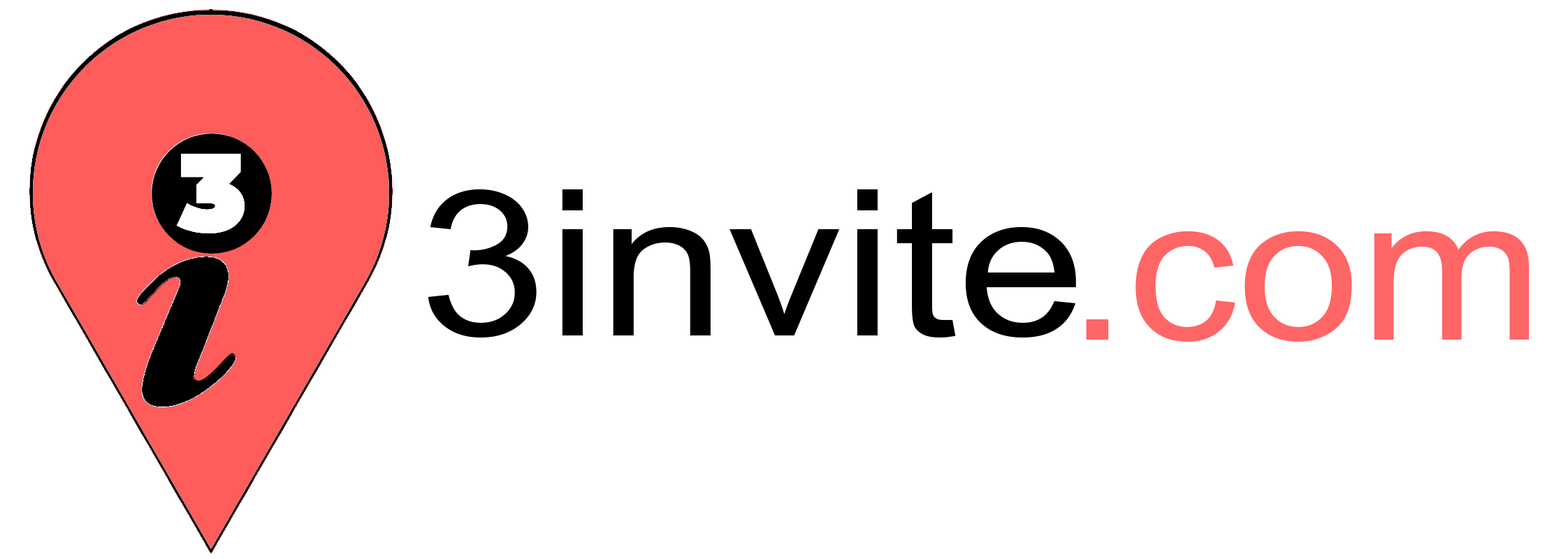
<style>
.page{position:relative;width:1568px;height:559px;background:#ffffff}
.page>*{position:absolute;margin:0}
.t1{font:204.3px "ArialMT";color:#000000;scale:1.13 1}
.t2{font:204.3px "ArialMT";color:#ff6666;scale:1.08 1}
</style>
<div class="page">
<p class="t1" style="left:428px;top:189px;width:648px;height:148px">3invite</p>
<p class="t2" style="left:1086px;top:231px;width:444px;height:111px">.com</p>
</div>
